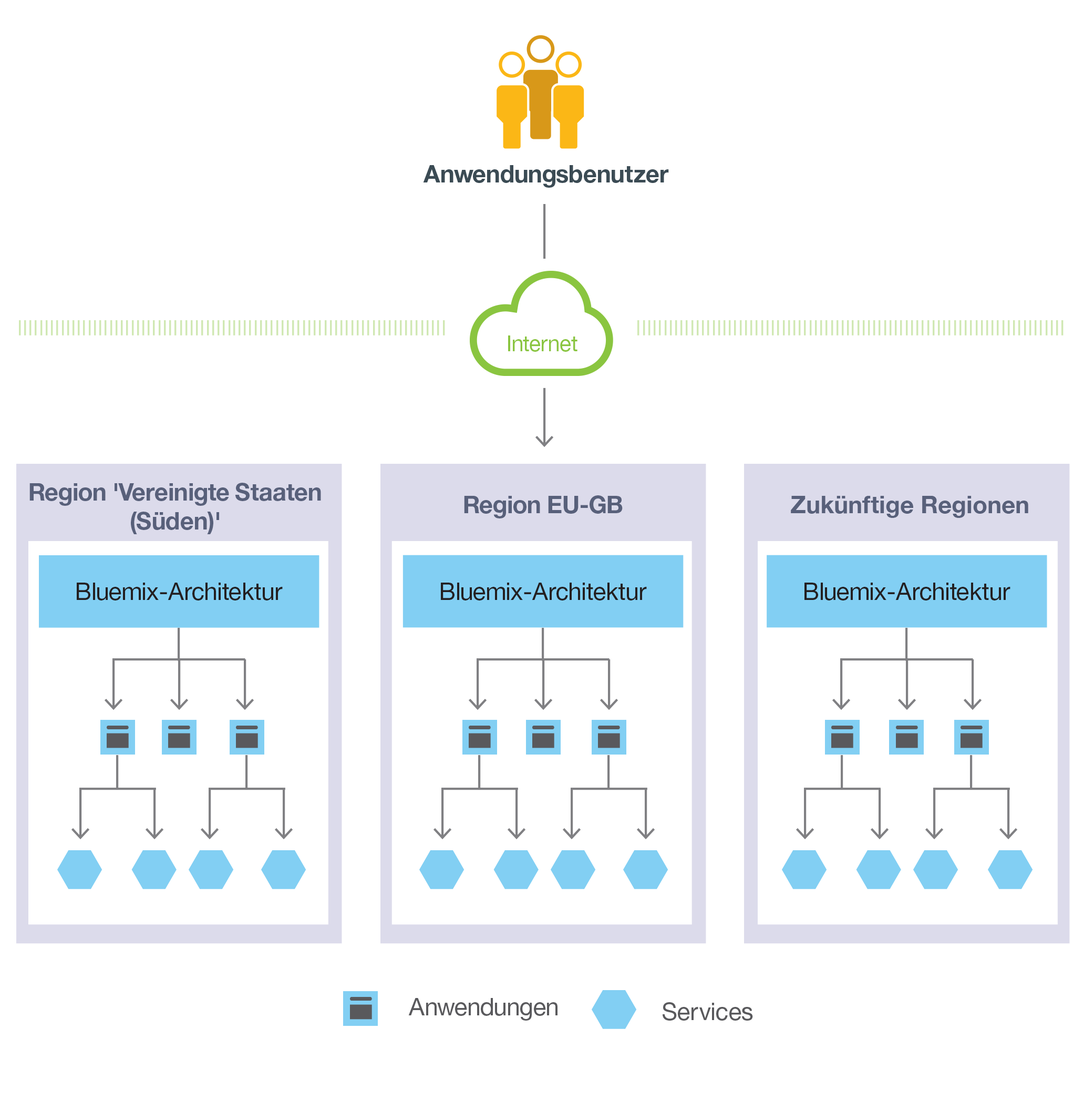
<style>
.page{position:relative;width:1084px;height:1100px;background:#ffffff}
.page>*{position:absolute;margin:0}
.t1{font:24.1px "HelvNeueBoldforIBM";color:#3b4b54}
.t2{font:21.9px "HelvNeueRomanforIBM";color:#8ac540}
.t3{font:24.1px "HelvNeueBoldforIBM";color:#58607a}
.t4{font:24.1px "HelveticaNeue-Bold";color:#58607a}
.t5{font:24.1px "HelvNeueRomanforIBM";color:#231f20}
.t6{font:24.1px "HelvNeueRomanforIBM";color:#59595c}
</style>
<div class="page">
<p class="t1" style="left:423px;top:165px;width:246px;height:23px">Anwendungsbenutzer</p>
<p class="t2" style="left:508px;top:335px;width:70px;height:17px">Internet</p>
<p class="t3" style="left:29px;top:483px;width:292px;height:51px;text-align:center">Region 'Vereinigte Staaten (Süden)'</p>
<p class="t3" style="left:464px;top:495px;width:159px;height:23px">Region EU-GB</p>
<p class="t4" style="left:791px;top:496px;width:238px;height:22px">Zukünftige Regionen</p>
<p class="t5" style="left:77px;top:582px;width:206px;height:18px">Bluemix-Architektur</p>
<p class="t5" style="left:441px;top:582px;width:206px;height:18px">Bluemix-Architektur</p>
<p class="t5" style="left:805px;top:582px;width:206px;height:18px">Bluemix-Architektur</p>
<p class="t6" style="left:408px;top:998px;width:150px;height:22px">Anwendungen</p>
<p class="t6" style="left:663px;top:1002px;width:90px;height:18px">Services</p>
</div>
